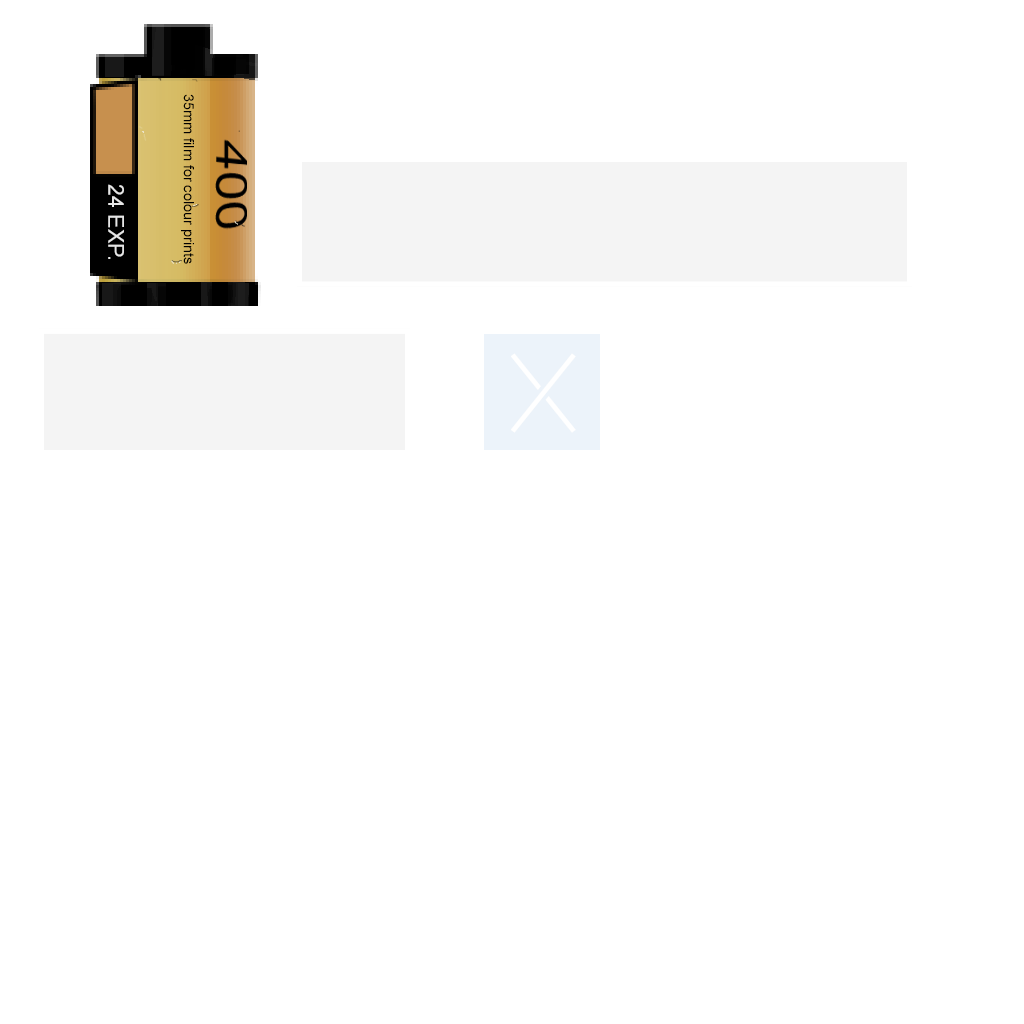
<style>
.page{position:relative;width:1024px;height:1024px;background:#ffffff}
.page>*{position:absolute;margin:0}
.t1{font:14.4px "ArialMT";color:#000000}
.t2{font:22px "ArialMT";color:#e6e6e6}
.t3{font:141.6px "Existence-StencilLight";letter-spacing:0.2em;color:#ffffff}
</style>
<div class="page">
<p class="t1" style="left:181px;top:94px;width:13px;height:170px;rotate:90deg">35mm film for colour prints</p>
<p class="t2" style="left:108px;top:184px;width:16px;height:75px;rotate:90deg">24 EXP.</p>
<p class="t3" style="left:511px;top:353px;width:65px;height:80px">x</p>
</div>
